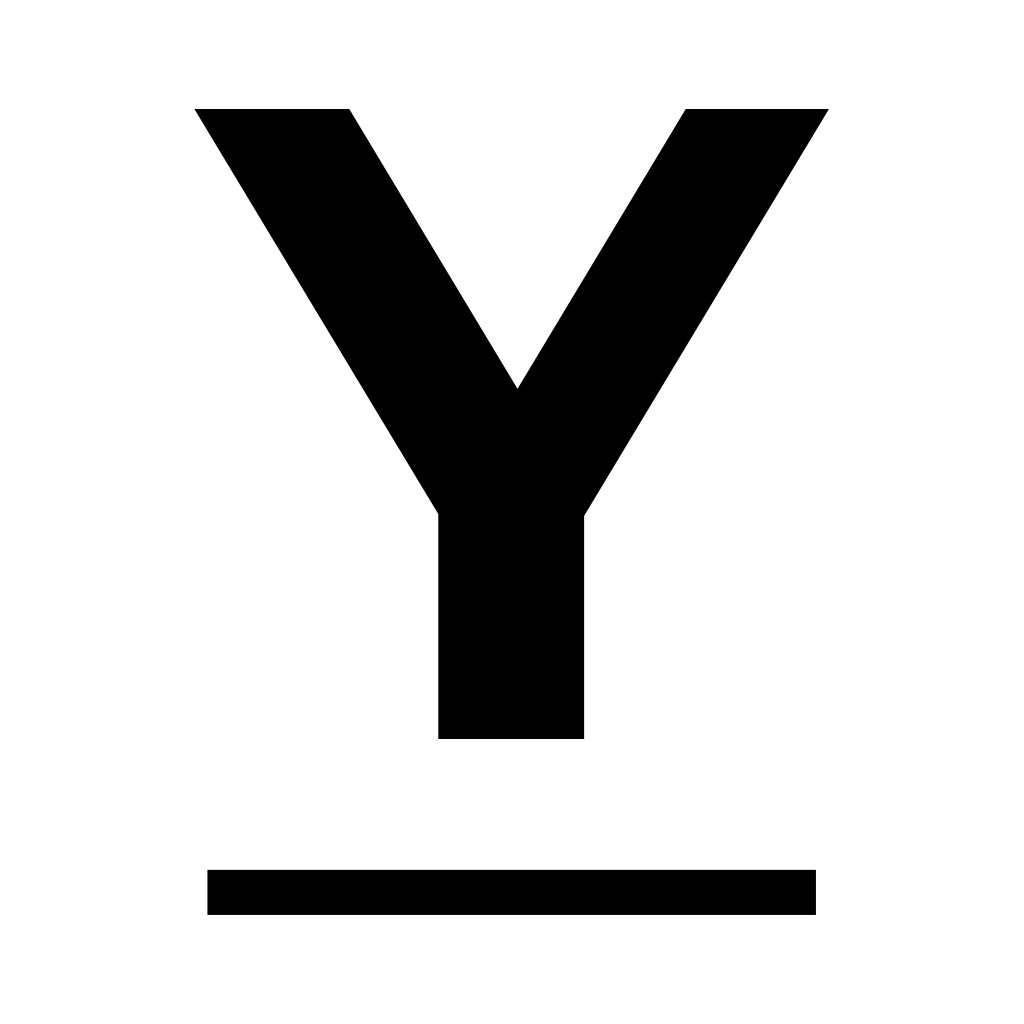
<style>
.page{position:relative;width:1024px;height:1024px;background:#ffffff}
.page>*{position:absolute;margin:0}
.t1{font:900px "Montserrat-Bold";color:#000000;text-decoration:underline}
</style>
<div class="page">
<p class="t1" style="left:194px;top:109px;width:635px;height:806px">Y</p>
</div>
